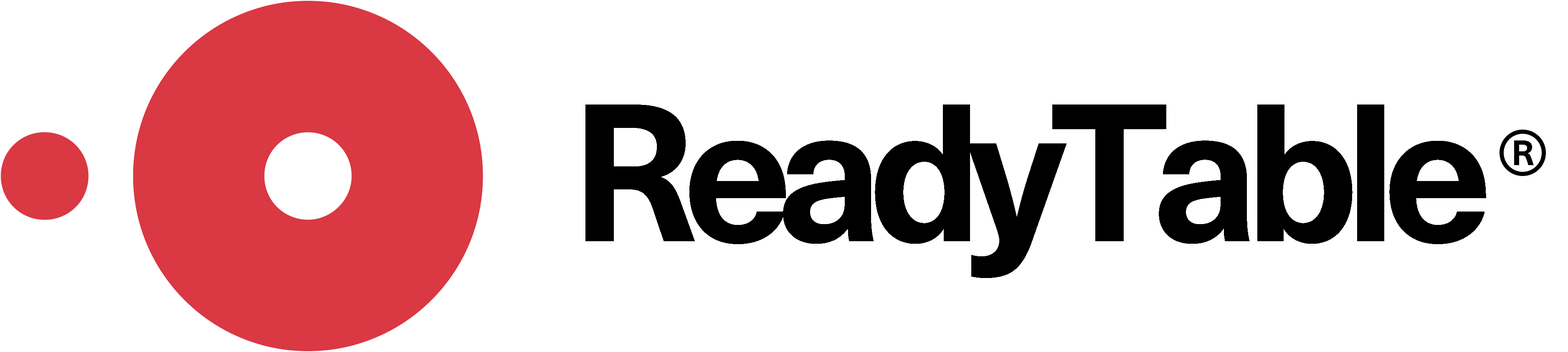
<style>
.page{position:relative;width:1568px;height:352px;background:#ffffff}
.page>*{position:absolute;margin:0}
.t1{font:191.4px "NeueHaasUnicaW1G-Bold";letter-spacing:-0.075em;color:#000000}
.t2{font:34.8px "NeueHaasUnicaW1G-Bold";letter-spacing:-0.075em;color:#000000}
</style>
<div class="page">
<p class="t1" style="left:585px;top:104px;width:901px;height:174px">ReadyTable</p>
<p class="t2" style="left:1514px;top:140px;width:20px;height:25px">R</p>
</div>
